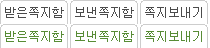
<style>
.page{position:relative;width:210px;height:48px;background:#ffffff}
.page>*{position:absolute;margin:0}
.t1{font:12px "Gulim";color:#4b4b4b}
.t2{font:12px "Gulim";color:#588c35}
</style>
<div class="page">
<p class="t1" style="left:5px;top:7px;width:59px;height:11px">받은쪽지함</p>
<p class="t1" style="left:75px;top:7px;width:59px;height:11px">보낸쪽지함</p>
<p class="t1" style="left:145px;top:7px;width:57px;height:11px">쪽지보내기</p>
<p class="t2" style="left:5px;top:31px;width:59px;height:11px">받은쪽지함</p>
<p class="t2" style="left:75px;top:31px;width:59px;height:11px">보낸쪽지함</p>
<p class="t2" style="left:145px;top:31px;width:57px;height:11px">쪽지보내기</p>
</div>
